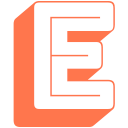
<style>
.page{position:relative;width:128px;height:128px;background:#ffffff}
.page>*{position:absolute;margin:0}
.t1{font:147.7px "BungeeShade-Regular";letter-spacing:0.06em;color:#ff764d}
</style>
<div class="page">
<p class="t1" style="left:13px;top:1px;width:102px;height:126px">E</p>
</div>
